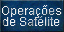
<style>
.page{position:relative;width:64px;height:32px}
.page>*{position:absolute;margin:0}
.t1{font:12px/11.3px "ArialMT";color:#efefef}
</style>
<div class="page">
<p class="t1" style="left:2px;top:5px;width:59px;height:21px;text-align:center">Operações<br>de Satélite</p>
</div>
